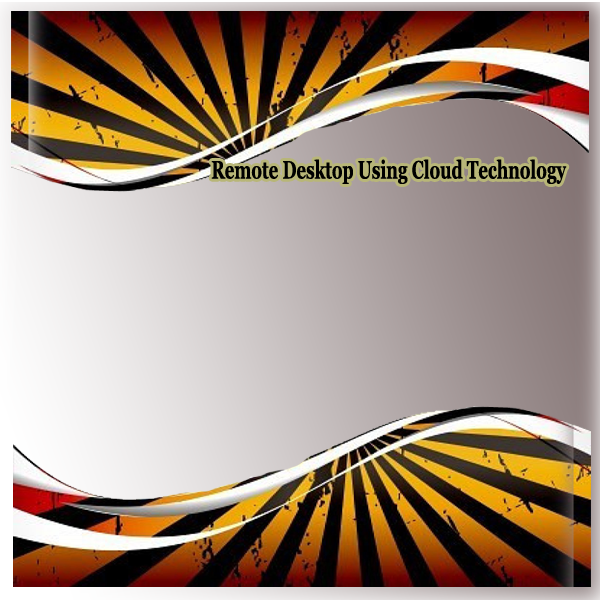
<style>
.page{position:relative;width:600px;height:600px}
.page>*{position:absolute;margin:0}
.t1{font:25.1px "Georgia-Bold";color:#000000;scale:0.67 1}
</style>
<div class="page">
<p class="t1" style="left:211px;top:159px;width:356px;height:25px">Remote Desktop Using Cloud Technology</p>
</div>
